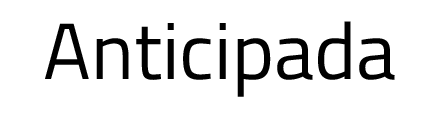
<style>
.page{position:relative;width:447px;height:118px;background:#ffffff}
.page>*{position:absolute;margin:0}
.t1{font:80px "TitilliumWeb-Regular";color:#000000}
</style>
<div class="page">
<p class="t1" style="left:45px;top:21px;width:350px;height:76px">Anticipada</p>
</div>
